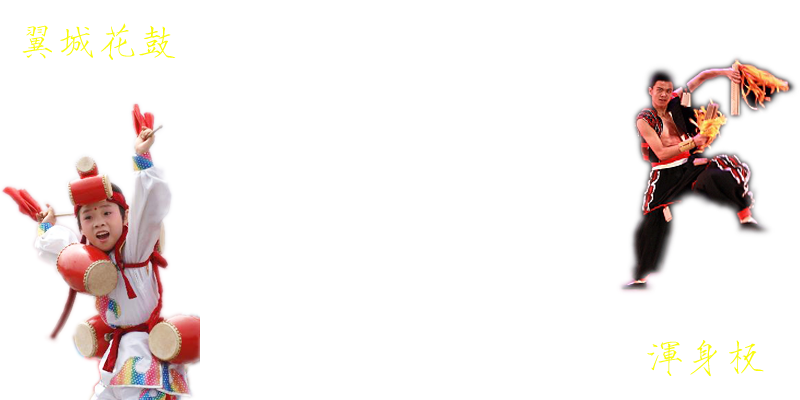
<style>
.page{position:relative;width:800px;height:400px;background:#ffffff}
.page>*{position:absolute;margin:0}
.t1{font:40px "HYi3gf";color:#f8fb0a}
</style>
<div class="page">
<p class="t1" style="left:22px;top:23px;width:154px;height:37px">翼城花鼓</p>
<p class="t1" style="left:647px;top:340px;width:117px;height:37px">浑身板</p>
</div>
